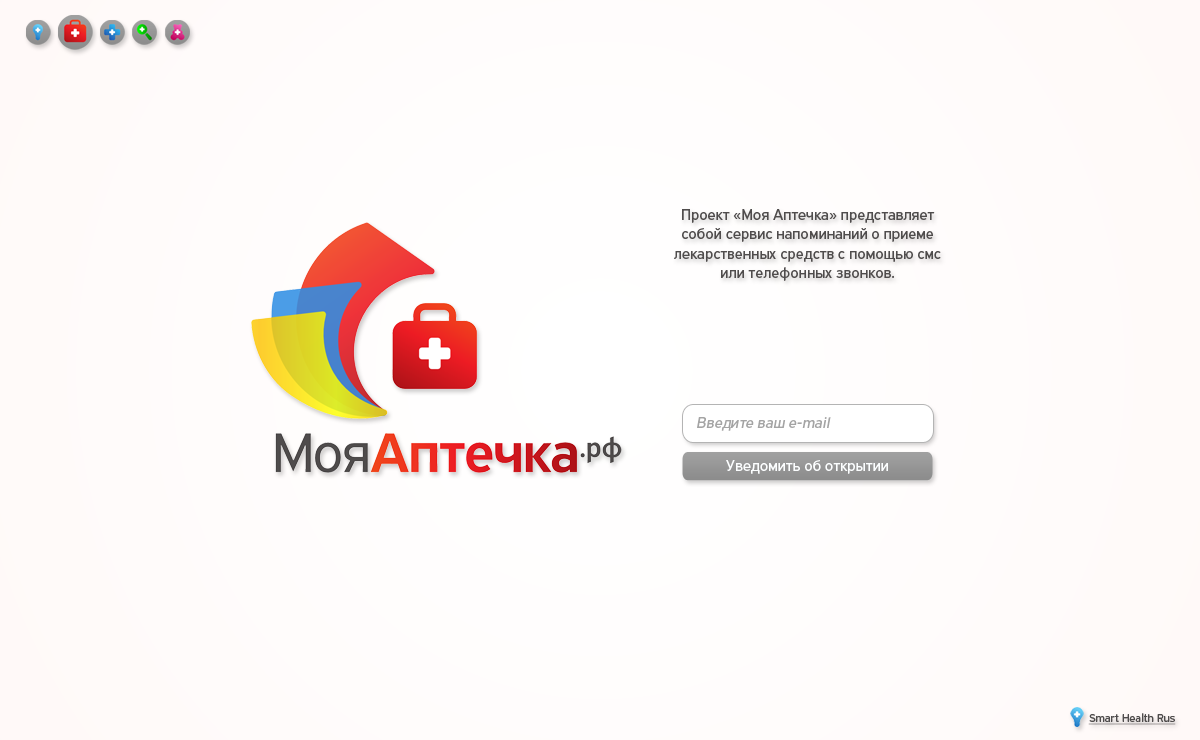
<style>
.page{position:relative;width:1200px;height:740px}
.page>*{position:absolute;margin:0}
.t1{font:16px "PFHighwaySansPro-Regular";color:#4f4c4c}
.t2{font:16px "PFHighwaySansPro-Regular";color:#a4a4a4;font-style:italic}
.t3{font:16px "PFHighwaySansPro-Regular";color:#fcfeff}
.t4{font:12px "PFHighwaySansPro-Regular";color:#4f4c4c;text-decoration:underline}
</style>
<div class="page">
<p class="t1" style="left:674px;top:209px;width:267px;height:72px;text-align:center">Проект «Моя Аптечка» представляет собой сервис напоминаний о приеме лекарственных средств с помощью смс или телефонных звонков.</p>
<p class="t2" style="left:697px;top:417px;width:134px;height:14px">Введите ваш e-mail</p>
<p class="t3" style="left:726px;top:460px;width:162px;height:14px">Уведомить об открытии</p>
<p class="t4" style="left:1088px;top:713px;width:88px;height:12px">Smart Health Rus</p>
</div>
